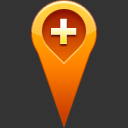
<style>
.page{position:relative;width:128px;height:128px;background:#333333}
.page>*{position:absolute;margin:0}
.t1{font:50px "Arial-BoldMT"}
</style>
<div class="page">
<p class="t1" style="left:51px;top:18px;width:26px;height:26px">+</p>
</div>
